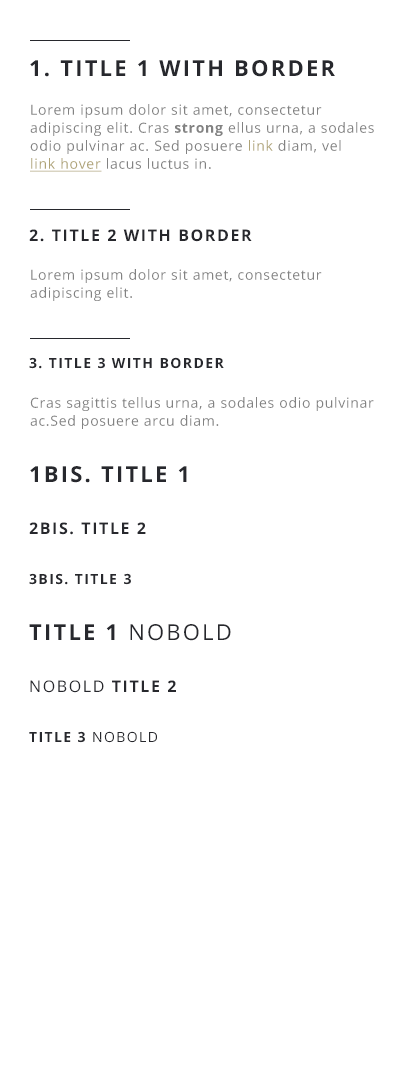
<style>
.page{position:relative;width:420px;height:1082px;background:#ffffff}
.page>*{position:absolute;margin:0}
.t1{font:22px "OpenSans-Bold";letter-spacing:0.1em;color:#27282d;text-transform:uppercase}
.t2{font:14px/18px "OpenSans";letter-spacing:0.05em;color:#828282}
.t3{font:14px/18px "OpenSans-Bold";letter-spacing:0.05em;color:#828282}
.t4{font:14px/18px "OpenSans";letter-spacing:0.05em;color:#afa376}
.t5{font:14px/18px "OpenSans";letter-spacing:0.05em;color:#afa376;text-decoration:underline}
.t6{font:16px "OpenSans-Bold";letter-spacing:0.1em;color:#27282d;text-transform:uppercase}
.t7{font:14px "OpenSans-Bold";letter-spacing:0.1em;color:#27282d;text-transform:uppercase}
.t8{font:22px "OpenSans";letter-spacing:0.1em;color:#27282d;text-transform:uppercase}
.t9{font:16px "OpenSans";letter-spacing:0.1em;color:#27282d;text-transform:uppercase}
.t10{font:14px "OpenSans";letter-spacing:0.1em;color:#27282d;text-transform:uppercase}
</style>
<div class="page">
<p class="t1" style="left:30px;top:60px;width:305px;height:17px">1. title 1 with border</p>
<p class="t2" style="left:30px;top:104px;width:344px;height:68px">Lorem ipsum dolor sit amet, consectetur adipiscing elit. Cras <span class="t3">strong</span> ellus urna, a sodales odio pulvinar ac. Sed posuere <span class="t4">link </span>diam, vel <br><span class="t5">link hover</span> lacus luctus in.</p>
<p class="t6" style="left:29px;top:229px;width:223px;height:13px">2. title 2 with border</p>
<p class="t2" style="left:30px;top:269px;width:292px;height:32px">Lorem ipsum dolor sit amet, consectetur adipiscing elit.</p>
<p class="t7" style="left:29px;top:357px;width:195px;height:12px">3. title 3 with border</p>
<p class="t2" style="left:30px;top:397px;width:344px;height:32px">Cras sagittis tellus urna, a sodales odio pulvinar ac.Sed posuere arcu diam.</p>
<p class="t1" style="left:30px;top:466px;width:157px;height:17px">1bis. title 1</p>
<p class="t6" style="left:29px;top:522px;width:117px;height:13px">2BIS. title 2</p>
<p class="t7" style="left:29px;top:573px;width:102px;height:12px">3bis. title 3</p>
<p class="t1" style="left:29px;top:624px;width:202px;height:17px">title 1 <span class="t8">nobold</span></p>
<p class="t6" style="left:30px;top:680px;width:146px;height:13px"><span class="t9">nobold</span> title 2</p>
<p class="t7" style="left:29px;top:731px;width:128px;height:12px">title 3 <span class="t10">nobold</span></p>
</div>
